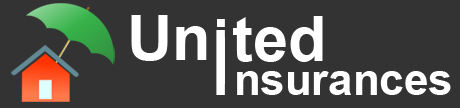
<style>
.page{position:relative;width:460px;height:108px;background:#333333}
.page>*{position:absolute;margin:0}
.t1{font:62.8px "Arial-BoldMT";color:#ffffff}
.t2{font:90px "ArialMT";color:#fefefe}
.t3{font:90px "ArialMT";color:#ffffff}
.t4{font:44px "Arial-BoldMT";color:#ffffff}
</style>
<div class="page">
<p class="t1" style="left:131px;top:15px;width:76px;height:46px">Un</p>
<p class="t1" style="left:233px;top:16px;width:90px;height:46px">ted</p>
<p class="t2" style="left:216px;top:30px;width:9px;height:65px">I</p>
<p class="t3" style="left:217px;top:19px;width:8px;height:65px">i</p>
<p class="t4" style="left:237px;top:71px;width:214px;height:24px">nsurances</p>
</div>
